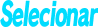
<style>
.page{position:relative;width:98px;height:28px;background:#ffffff}
.page>*{position:absolute;margin:0}
.t1{font:32px "RodinPro-EB";letter-spacing:-0.051em;color:#00dcfe;font-style:italic;scale:0.6 1}
</style>
<div class="page">
<p class="t1" style="left:0px;top:0px;width:98px;height:27px">Selecionar</p>
</div>
